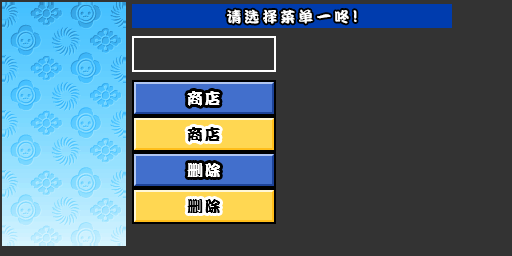
<style>
.page{position:relative;width:512px;height:256px;background:#333333}
.page>*{position:absolute;margin:0}
.t1{font:15px "DFPKanTingLiuW9";letter-spacing:0.2em;color:#ffffff}
.t2{font:17px "DFPKanTingLiuW9";letter-spacing:0.2em;color:#ffffff}
.t3{font:16px "DFPKanTingLiuW9";letter-spacing:0.1em;color:#ffffff}
.t4{font:16px "DFPKanTingLiuW9";letter-spacing:0.1em;color:#000000}
</style>
<div class="page">
<p class="t1" style="left:227px;top:9px;width:130px;height:15px">请选择菜单一咚<span class="t2">!</span></p>
<p class="t3" style="left:187px;top:91px;width:33px;height:15px">商店</p>
<p class="t4" style="left:187px;top:127px;width:33px;height:15px">商店</p>
<p class="t3" style="left:187px;top:163px;width:33px;height:14px">删除</p>
<p class="t4" style="left:187px;top:199px;width:33px;height:14px">删除</p>
</div>
